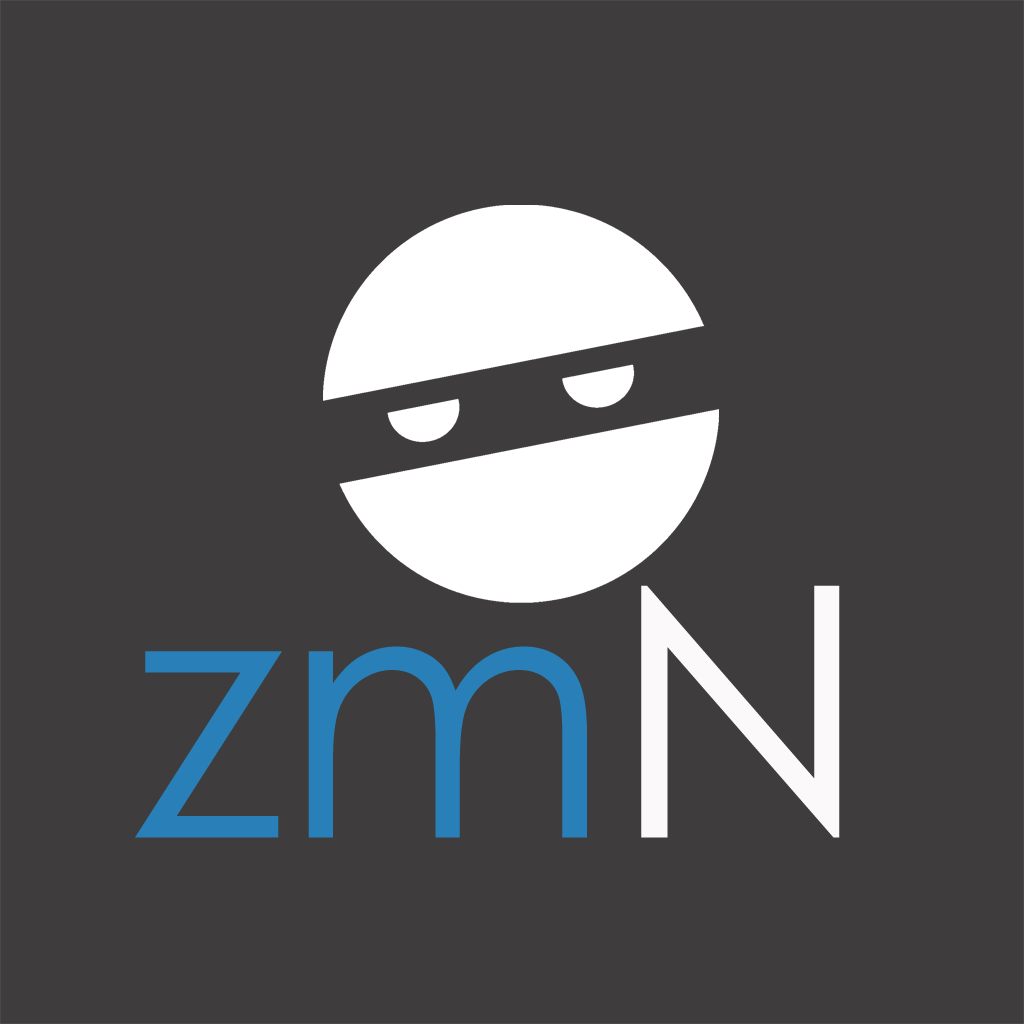
<style>
.page{position:relative;width:1024px;height:1024px;background:#3e3c3c}
.page>*{position:absolute;margin:0}
.t1{font:350px "CenturyGothic";color:#2980b9}
.t2{font:350px "CenturyGothic";color:#fbf9f9}
</style>
<div class="page">
<p class="t1" style="left:135px;top:585px;width:705px;height:253px">zm<span class="t2">N</span></p>
</div>
